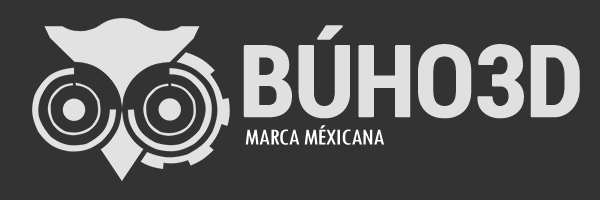
<style>
.page{position:relative;width:600px;height:200px;background:#333333}
.page>*{position:absolute;margin:0}
.t1{font:99.3px "Roboto-BoldCondensed";letter-spacing:-0.03em;color:#e0e0e1;font-weight:bold}
.t2{font:23.8px "TwCenMT-Condensed";letter-spacing:-0.03em;color:#ffffff;scale:1.2 1}
</style>
<div class="page">
<p class="t1" style="left:243px;top:25px;width:337px;height:94px">BÚHO3D</p>
<p class="t2" style="left:245px;top:125px;width:139px;height:20px">MARCA MÉXICANA</p>
</div>
